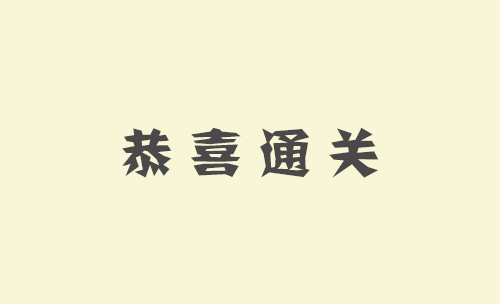
<style>
.page{position:relative;width:500px;height:304px;background:#f8f6d6}
.page>*{position:absolute;margin:0}
.t1{font:52px "JJianzi";letter-spacing:0.33em;color:#4a4849}
</style>
<div class="page">
<p class="t1" style="left:122px;top:127px;width:257px;height:51px">恭喜通关</p>
</div>
